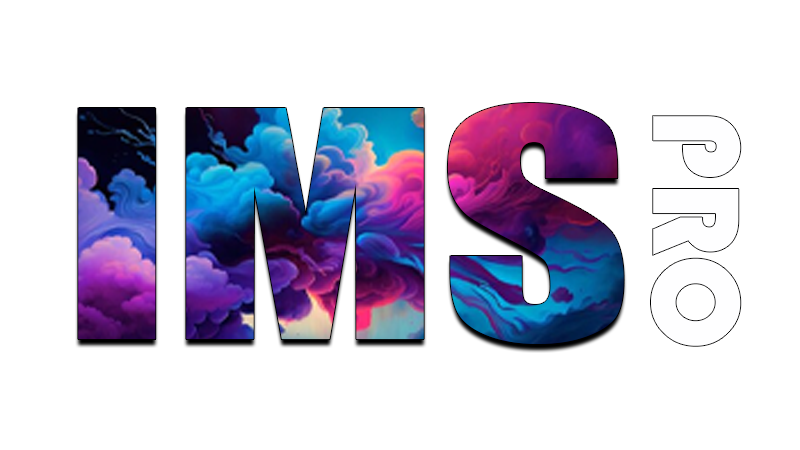
<style>
.page{position:relative;width:800px;height:450px;background:#ffffff}
.page>*{position:absolute;margin:0}
.t1{font:291.6px "Impact";scale:1.28 1}
</style>
<div class="page">
<p class="t1" style="left:78px;top:103px;width:546px;height:241px">IMS</p>
</div>
